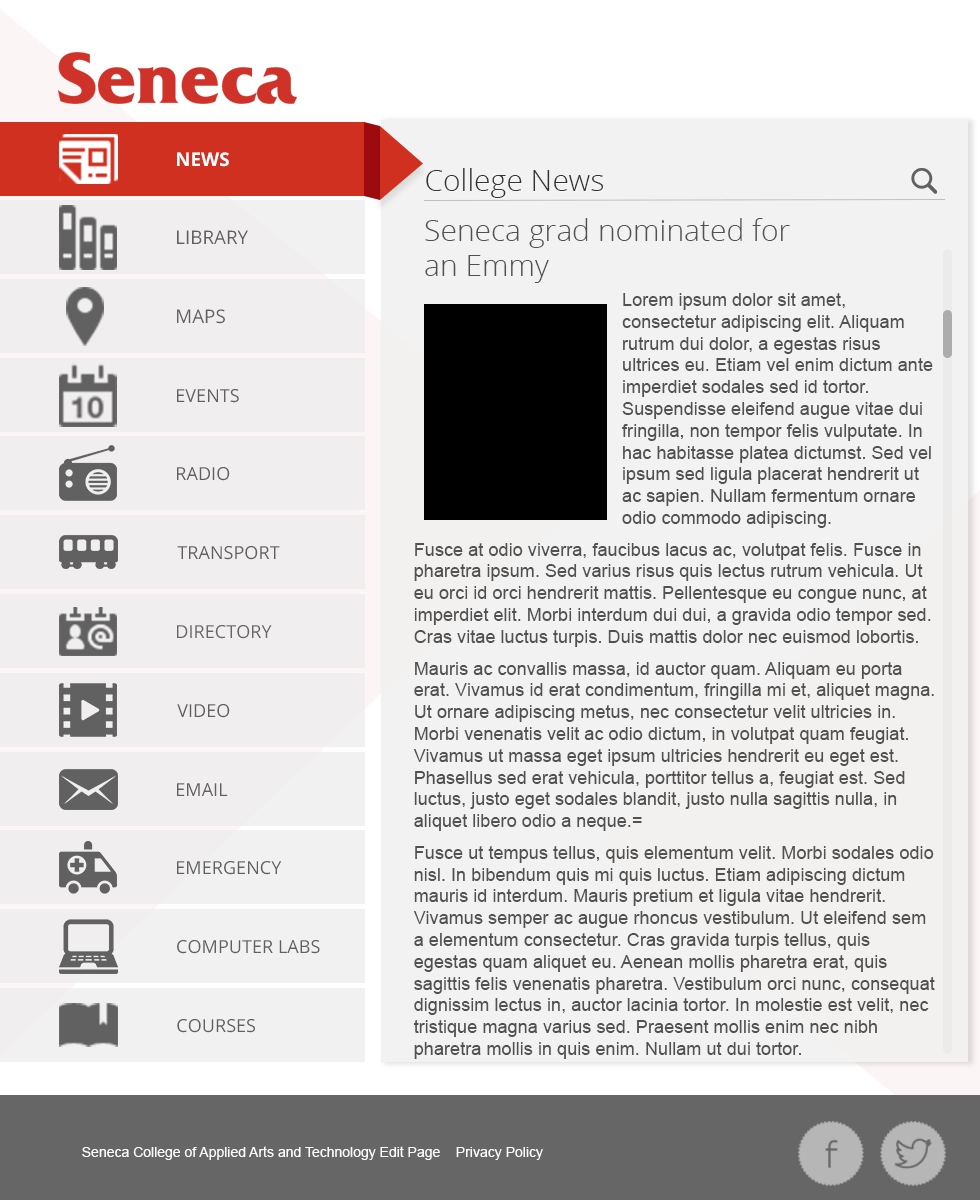
<style>
.page{position:relative;width:980px;height:1200px;background:#f3f2f2}
.page>*{position:absolute;margin:0}
.t1{font:18.7px "OpenSans-Bold";color:#ffffff;text-transform:uppercase}
.t2{font:30px "OpenSans-Light";color:#333333}
.t3{font:30px/25px "OpenSans-Light";color:#515151}
.t4{font:18.2px "ArialMT";color:#515151}
</style>
<div class="page">
<p class="t1" style="left:177px;top:152px;width:52px;height:15px">News</p>
<p class="t2" style="left:426px;top:168px;width:178px;height:30px">College News</p>
<p class="t3" style="left:425px;top:218px;width:365px;height:65px">Seneca grad nominated for <br>an Emmy</p>
<p class="t4" style="left:413px;top:293px;width:522px;height:766px">Lorem ipsum dolor sit amet, consectetur adipiscing elit. Aliquam rutrum dui dolor, a egestas risus ultrices eu. Etiam vel enim dictum ante imperdiet sodales sed id tortor. Suspendisse eleifend augue vitae dui fringilla, non tempor felis vulputate. In hac habitasse platea dictumst. Sed vel ipsum sed ligula placerat hendrerit ut ac sapien. Nullam fermentum ornare odio commodo adipiscing. <br>Fusce at odio viverra, faucibus lacus ac, volutpat felis. Fusce in pharetra ipsum. Sed varius risus quis lectus rutrum vehicula. Ut eu orci id orci hendrerit mattis. Pellentesque eu congue nunc, at imperdiet elit. Morbi interdum dui dui, a gravida odio tempor sed. Cras vitae luctus turpis. Duis mattis dolor nec euismod lobortis.<br>Mauris ac convallis massa, id auctor quam. Aliquam eu porta erat. Vivamus id erat condimentum, fringilla mi et, aliquet magna. Ut ornare adipiscing metus, nec consectetur velit ultricies in. Morbi venenatis velit ac odio dictum, in volutpat quam feugiat. Vivamus ut massa eget ipsum ultricies hendrerit eu eget est. Phasellus sed erat vehicula, porttitor tellus a, feugiat est. Sed luctus, justo eget sodales blandit, justo nulla sagittis nulla, in aliquet libero odio a neque.=<br>Fusce ut tempus tellus, quis elementum velit. Morbi sodales odio nisl. In bibendum quis mi quis luctus. Etiam adipiscing dictum mauris id interdum. Mauris pretium et ligula vitae hendrerit. Vivamus semper ac augue rhoncus vestibulum. Ut eleifend sem a elementum consectetur. Cras gravida turpis tellus, quis egestas quam aliquet eu. Aenean mollis pharetra erat, quis sagittis felis venenatis pharetra. Vestibulum orci nunc, consequat dignissim lectus in, auctor lacinia tortor. In molestie est velit, nec tristique magna varius sed. Praesent mollis enim nec nibh pharetra mollis in quis enim. Nullam ut dui tortor.</p>
</div>
